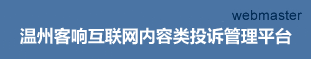
<style>
.page{position:relative;width:311px;height:59px;background:#4a74a4}
.page>*{position:absolute;margin:0}
.t1{font:17px "MicrosoftYaHei-Bold";color:#ffffff}
</style>
<div class="page">
<p class="t1" style="left:20px;top:27px;width:272px;height:18px">温州客响互联网内容类投诉管理平台</p>
</div>
